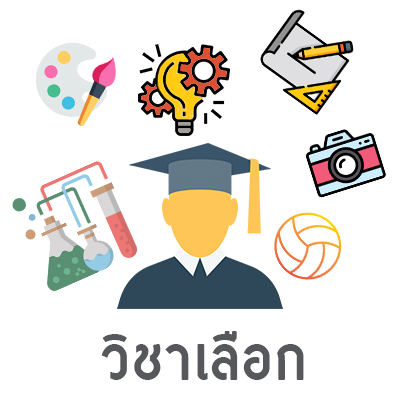
<style>
.page{position:relative;width:400px;height:400px;background:#ffffff}
.page>*{position:absolute;margin:0}
.t1{font:83.3px "Circular-Bold";color:#56585b}
</style>
<div class="page">
<p class="t1" style="left:101px;top:331px;width:203px;height:49px">วิชาเลือก</p>
</div>
